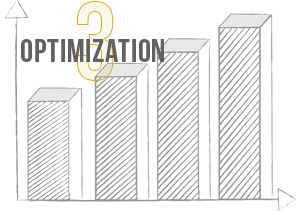
<style>
.page{position:relative;width:300px;height:211px;background:#ffffff}
.page>*{position:absolute;margin:0}
.t1{font:33px "BebasNeue";letter-spacing:0.022em;color:#616161}
</style>
<div class="page">
<p class="t1" style="left:21px;top:39px;width:143px;height:23px">Optimization</p>
</div>
